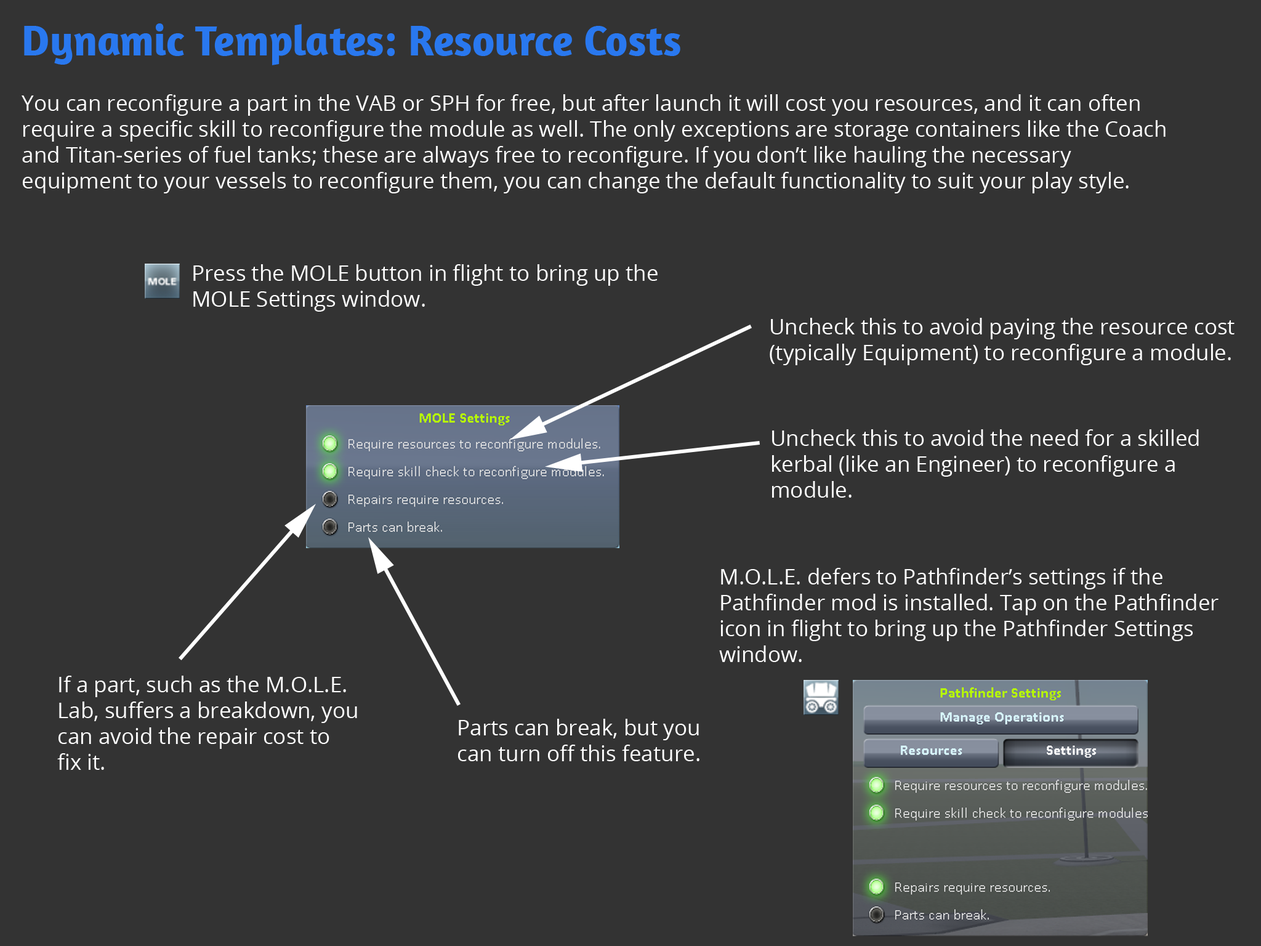
<style>
.page{position:relative;width:1261px;height:946px;background:#333333}
.page>*{position:absolute;margin:0}
.t1{font:43.1px "Amaranth-Bold";color:#2978ef}
.t2{font:21.5px "OpenSans";color:#ffffff}
</style>
<div class="page">
<p class="t1" style="left:24px;top:23px;width:656px;height:42px">Dynamic Templates: Resource Costs</p>
<p class="t2" style="left:22px;top:94px;width:1143px;height:99px">You can reconfigure a part in the VAB or SPH for free, but after launch it will cost you resources, and it can often require a specific skill to reconfigure the module as well. The only exceptions are storage containers like the Coach and Titan-series of fuel tanks; these are always free to reconfigure. If you don’t like hauling the necessary equipment to your vessels to reconfigure them, you can change the default functionality to suit your play style.</p>
<p class="t2" style="left:193px;top:264px;width:465px;height:48px">Press the MOLE button in flight to bring up the<br>MOLE Settings window.</p>
<p class="t2" style="left:770px;top:318px;width:464px;height:47px">Uncheck this to avoid paying the resource cost<br>(typically Equipment) to reconfigure a module.</p>
<p class="t2" style="left:772px;top:429px;width:427px;height:68px">Uncheck this to avoid the need for a skilled<br>kerbal (like an Engineer) to reconfigure a<br>module.</p>
<p class="t2" style="left:719px;top:568px;width:499px;height:94px">M.O.L.E. defers to Pathfinder’s settings if the<br>Pathfinder mod is installed. Tap on the Pathfinder<br>icon in flight to bring up the Pathfinder Settings<br>window.</p>
<p class="t2" style="left:57px;top:675px;width:300px;height:95px">If a part, such as the M.O.L.E.<br>Lab, suffers a breakdown, you<br>can avoid the repair cost to<br>fix it.</p>
<p class="t2" style="left:458px;top:719px;width:241px;height:42px">Parts can break, but you<br>can turn off this feature.</p>
</div>
